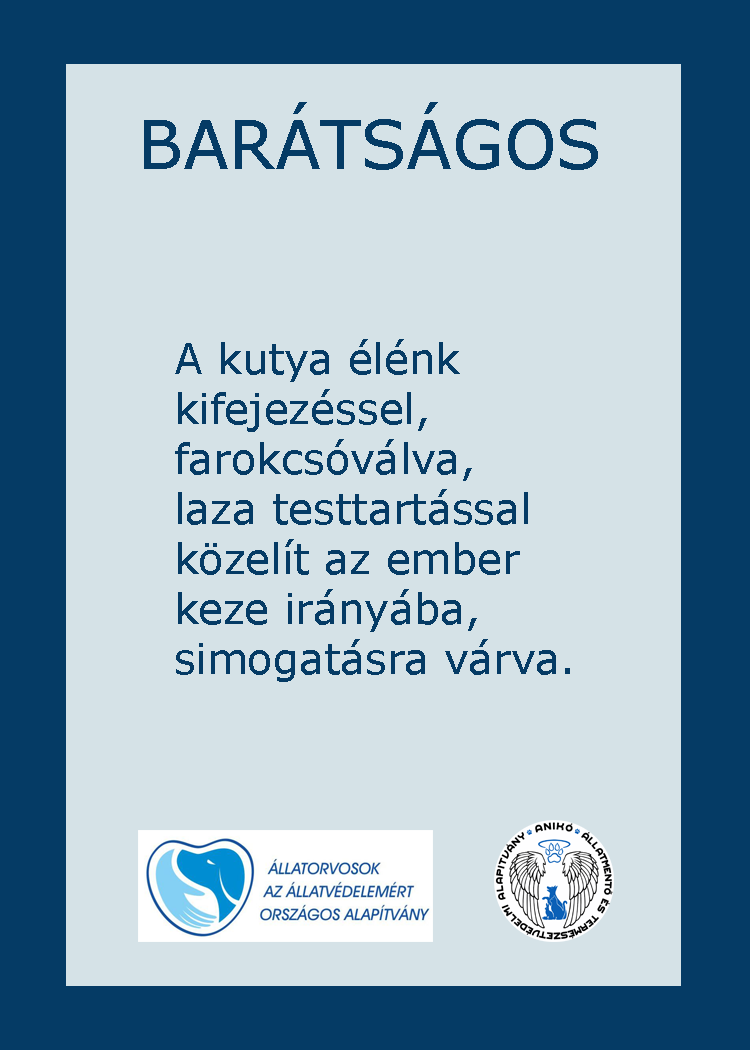
<style>
.page{position:relative;width:750px;height:1050px;background:#d5e2e7}
.page>*{position:absolute;margin:0}
.t1{font:66.7px "Verdana";color:#053b65}
.t2{font:66.7px "GravitateBRK";color:#053b65}
.t3{font:41.7px "Verdana";color:#053b65}
</style>
<div class="page">
<p class="t1" style="left:144px;top:102px;width:454px;height:68px"><span class="t2">         </span>BARÁTSÁGOS</p>
<p class="t3" style="left:175px;top:339px;width:395px;height:343px">A kutya élénk <br>kifejezéssel,<br>farokcsóválva,<br>laza testtartással<br>közelít az ember <br>keze irányába,<br>simogatásra várva.</p>
</div>
